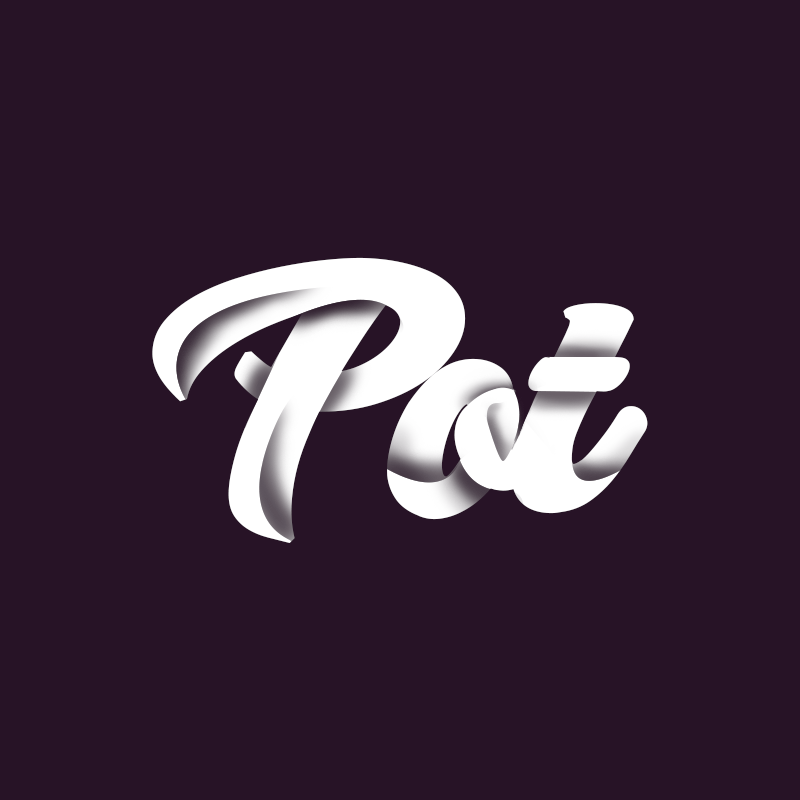
<style>
.page{position:relative;width:800px;height:800px;background:#271326}
.page>*{position:absolute;margin:0}
.t1{font:300px "BreezePersonalUse-Regular";letter-spacing:-0.04em;color:#ffffff;font-weight:bold}
</style>
<div class="page">
<p class="t1" style="left:152px;top:257px;width:496px;height:286px">Pot</p>
</div>
